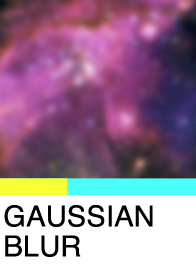
<style>
.page{position:relative;width:196px;height:264px;background:#ffffff}
.page>*{position:absolute;margin:0}
.t1{font:28.9px/30px "Helvetica";color:#000000}
</style>
<div class="page">
<p class="t1" style="left:4px;top:205px;width:149px;height:52px">GAUSSIAN<br>BLUR</p>
</div>
